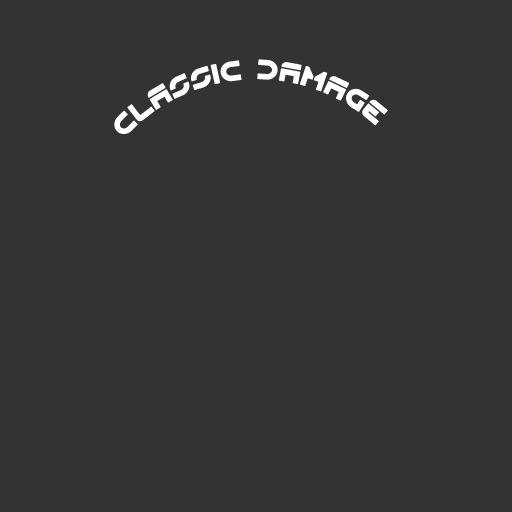
<style>
.page{position:relative;width:512px;height:512px;background:#333333}
.page>*{position:absolute;margin:0}
.t1{font:36px "Flynn";color:#ffffff}
</style>
<div class="page">
<p class="t1" style="left:114px;top:59px;width:274px;height:75px;text-align:right">classic damage</p>
</div>
